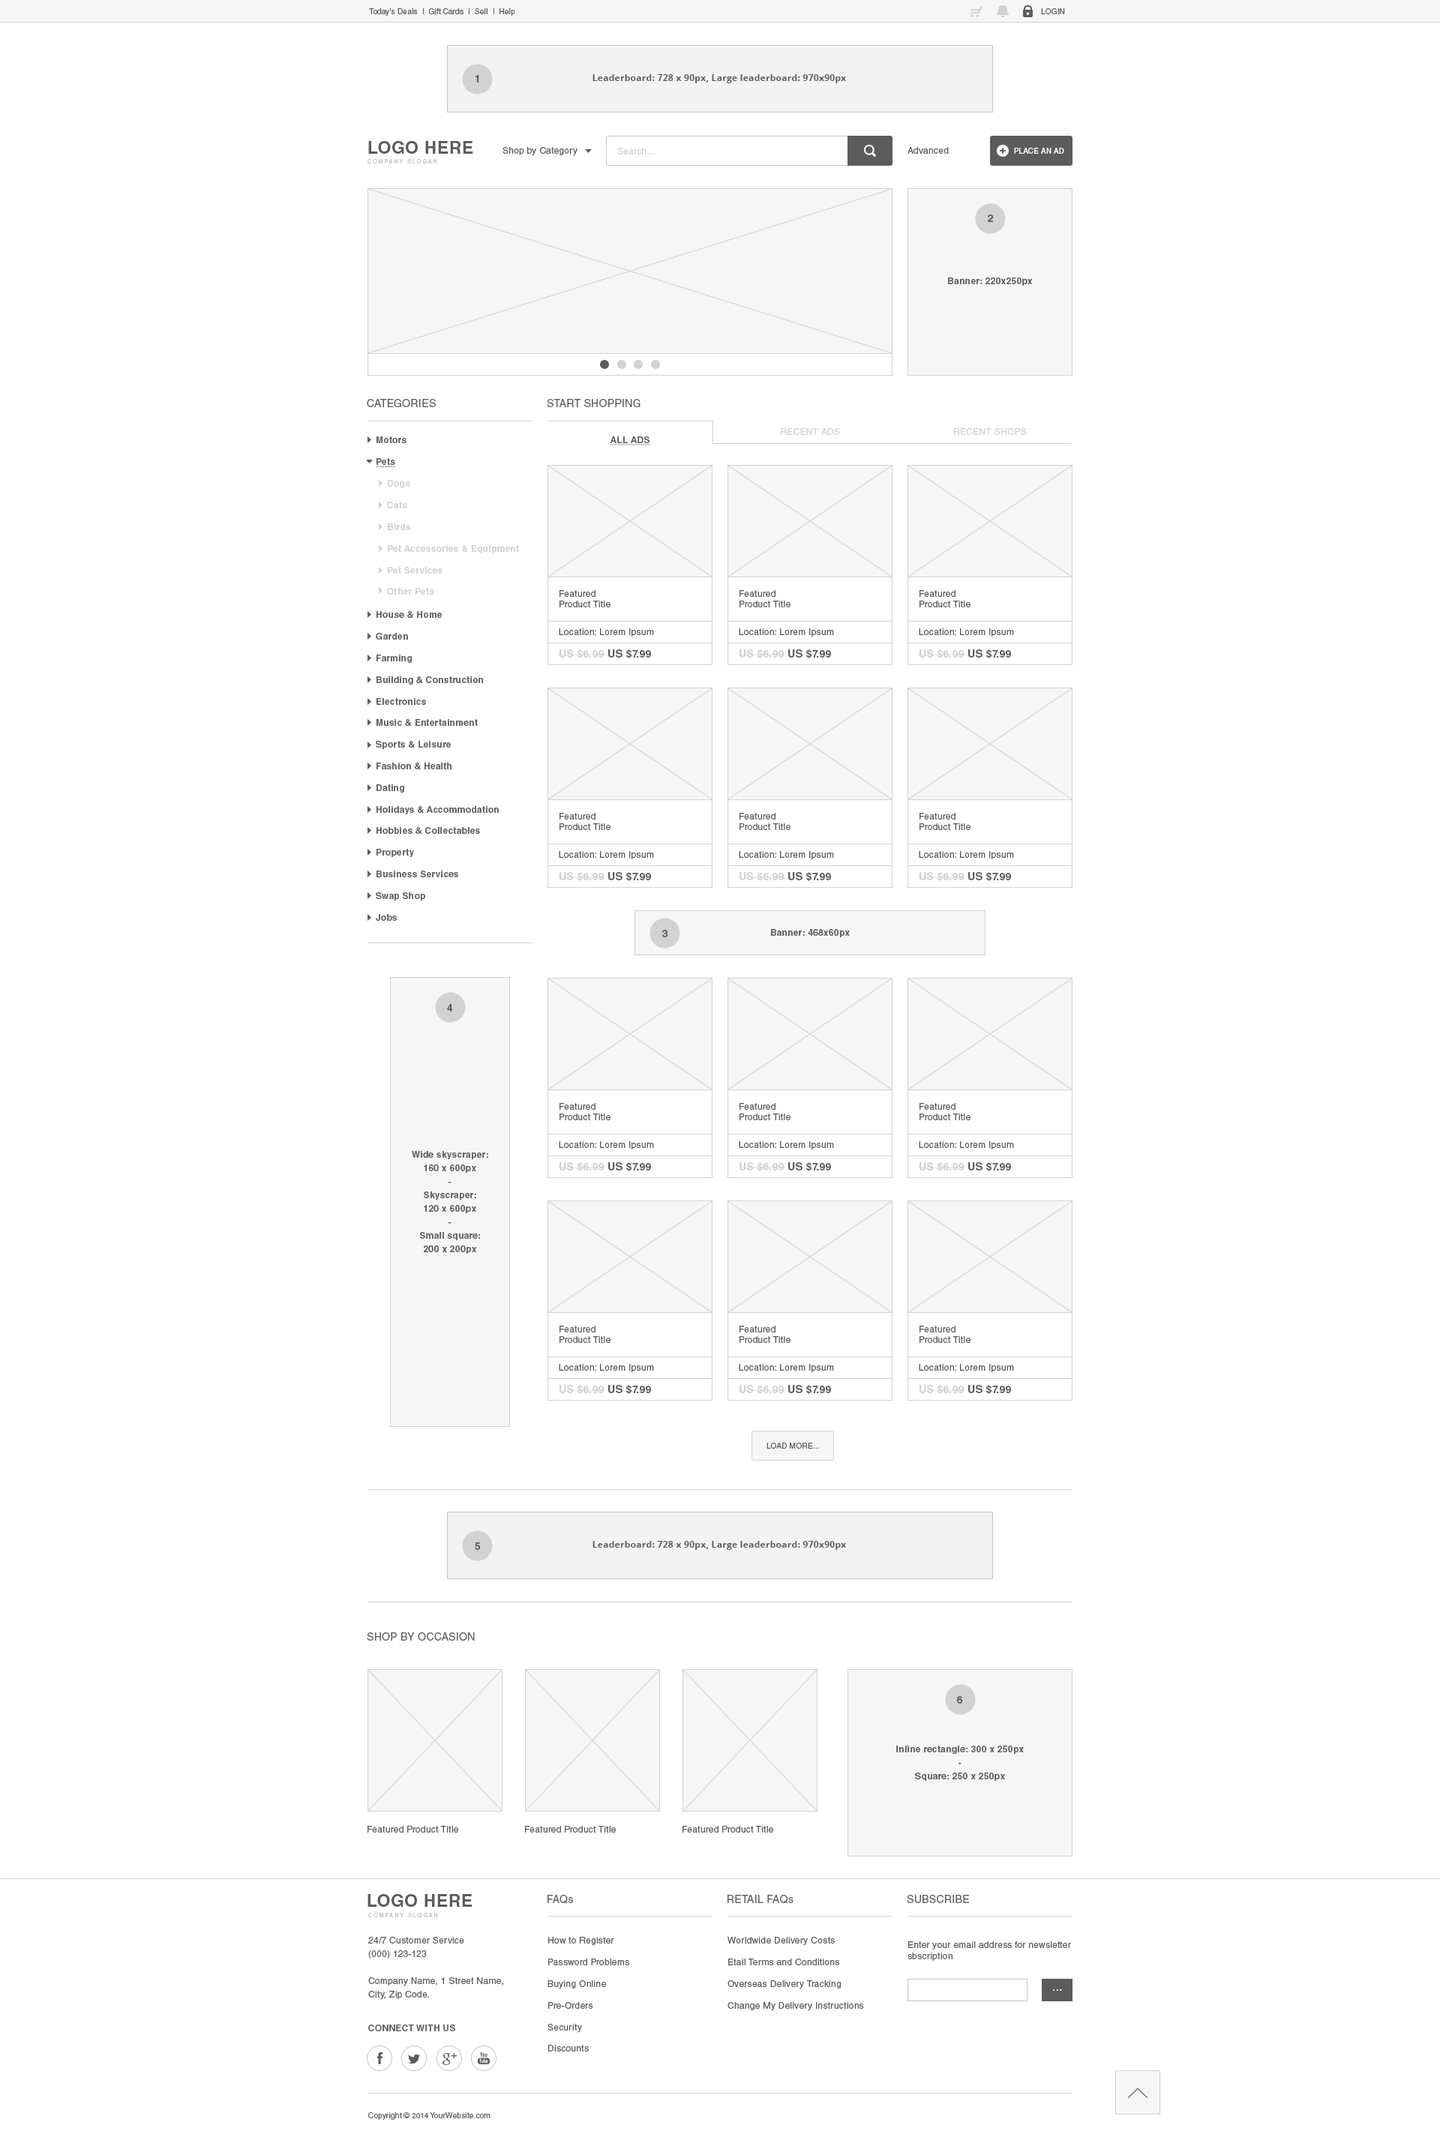
<style>
.page{position:relative;width:1440px;height:2140px;background:#ffffff}
.page>*{position:absolute;margin:0}
.t1{font:7.5px "HelveticaLTStd-Roman";letter-spacing:0.024em;color:#5c5c5c}
.t2{font:7.5px "HelveticaLTStd-Roman";letter-spacing:0.024em;color:#5c5c5c;text-transform:uppercase}
.t3{font:10.5px "HelveticaLTStd-Bold";letter-spacing:0.024em;color:#5c5c5c}
.t4{font:9px "OpenSans-Bold";letter-spacing:0.024em;color:#5c5c5c}
.t5{font:17.2px "HelveticaLTStd-Bold";letter-spacing:0.024em;color:#5c5c5c;text-transform:uppercase}
.t6{font:9px "HelveticaLTStd-Roman";letter-spacing:0.024em;color:#5c5c5c}
.t7{font:9px "HelveticaLTStd-Roman";letter-spacing:0.024em;color:#d2d2d2}
.t8{font:7.5px "HelveticaLTStd-Roman";letter-spacing:0.024em;color:#ffffff;text-transform:uppercase}
.t9{font:5.2px "HelveticaLTStd-Roman";letter-spacing:0.3em;color:#c5c5c5;text-transform:uppercase}
.t10{font:9px "HelveticaLTStd-Bold";letter-spacing:0.024em;color:#5c5c5c}
.t11{font:10.5px "HelveticaLTStd-Roman";letter-spacing:0.024em;color:#5c5c5c;text-transform:uppercase}
.t12{font:9px "HelveticaLTStd-Bold";letter-spacing:0.024em;color:#5c5c5c;text-decoration:underline}
.t13{font:9px "HelveticaLTStd-Bold";letter-spacing:0.024em;color:#5c5c5c;text-transform:uppercase;text-decoration:underline}
.t14{font:9px "HelveticaLTStd-Roman";letter-spacing:0.024em;color:#d2d2d2;text-transform:uppercase}
.t15{font:9px "HelveticaLTStd-Bold";letter-spacing:0.024em;color:#d2d2d2}
.t16{font:10.5px "HelveticaLTStd-Bold";letter-spacing:0.024em;color:#d2d2d2}
.t17{font:9px/13.5px "HelveticaLTStd-Bold";letter-spacing:0.024em;color:#5c5c5c}
.t18{font:10.5px "HelveticaLTStd-Roman";letter-spacing:0.024em;color:#5c5c5c}
.t19{font:9px/13.5px "HelveticaLTStd-Roman";letter-spacing:0.024em;color:#5c5c5c}
.t20{font:12px "OpenSans";letter-spacing:0.024em;color:#ffffff;text-transform:uppercase}
.t21{font:9px "HelveticaLTStd-Bold";letter-spacing:0.024em;color:#5c5c5c;text-transform:uppercase}
</style>
<div class="page">
<p class="t1" style="left:369px;top:8px;width:146px;height:8px">Today's Deals  |  Gift Cards  |  Sell  |  Help</p>
<p class="t2" style="left:1041px;top:8px;width:24px;height:6px">login</p>
<p class="t3" style="left:475px;top:75px;width:4px;height:7px">1</p>
<p class="t4" style="left:592px;top:74px;width:254px;height:9px">Leaderboard: 728 x 90px, Large leaderboard: 970x90px</p>
<p class="t5" style="left:368px;top:141px;width:105px;height:13px">Logo Here</p>
<p class="t6" style="left:502px;top:147px;width:76px;height:9px">Shop by Category</p>
<p class="t7" style="left:617px;top:148px;width:37px;height:6px">Search...</p>
<p class="t6" style="left:908px;top:147px;width:41px;height:7px">Advanced</p>
<p class="t8" style="left:1014px;top:148px;width:50px;height:6px">Place an ad</p>
<p class="t9" style="left:368px;top:159px;width:69px;height:5px">Company Slogan</p>
<p class="t3" style="left:988px;top:214px;width:6px;height:8px">2</p>
<p class="t10" style="left:948px;top:278px;width:85px;height:8px">Banner: 220x250px</p>
<p class="t11" style="left:367px;top:399px;width:69px;height:8px">Categories</p>
<p class="t11" style="left:547px;top:399px;width:93px;height:8px">Start shopping</p>
<p class="t10" style="left:376px;top:436px;width:30px;height:31px">Motors<br><br><span class="t12">Pets</span></p>
<p class="t13" style="left:610px;top:436px;width:40px;height:10px">All Ads</p>
<p class="t14" style="left:781px;top:428px;width:59px;height:7px">Recent Ads</p>
<p class="t14" style="left:954px;top:428px;width:73px;height:7px">Recent Shops</p>
<p class="t15" style="left:387px;top:480px;width:132px;height:115px">Dogs<br><br>Cats<br><br>Birds<br><br>Pet Accessories &amp; Equipment<br><br>Pet Services <br><br>Other Pets</p>
<p class="t6" style="left:560px;top:590px;width:50px;height:18px">Featured<br>Product Title</p>
<p class="t6" style="left:740px;top:590px;width:50px;height:18px">Featured<br>Product Title</p>
<p class="t6" style="left:920px;top:590px;width:50px;height:18px">Featured<br>Product Title</p>
<p class="t10" style="left:376px;top:611px;width:123px;height:310px">House &amp; Home<br><br>Garden<br><br>Farming<br><br>Building &amp; Construction<br><br>Electronics<br><br>Music &amp; Entertainment<br><br>Sports &amp; Leisure<br><br>Fashion &amp; Health<br><br>Dating<br><br>Holidays &amp; Accommodation<br><br>Hobbies &amp; Collectables<br><br>Property<br><br>Business Services<br><br>Swap Shop<br><br>Jobs</p>
<p class="t6" style="left:559px;top:628px;width:95px;height:9px">Location: Lorem Ipsum</p>
<p class="t6" style="left:739px;top:628px;width:95px;height:9px">Location: Lorem Ipsum</p>
<p class="t6" style="left:919px;top:628px;width:95px;height:9px">Location: Lorem Ipsum</p>
<p class="t16" style="left:559px;top:650px;width:92px;height:9px">US $6.99 <span class="t3">US $7.99</span></p>
<p class="t16" style="left:739px;top:650px;width:92px;height:9px">US $6.99 <span class="t3">US $7.99</span></p>
<p class="t16" style="left:919px;top:650px;width:92px;height:9px">US $6.99 <span class="t3">US $7.99</span></p>
<p class="t6" style="left:560px;top:813px;width:50px;height:17px">Featured<br>Product Title</p>
<p class="t6" style="left:740px;top:813px;width:50px;height:17px">Featured<br>Product Title</p>
<p class="t6" style="left:920px;top:813px;width:50px;height:17px">Featured<br>Product Title</p>
<p class="t6" style="left:559px;top:851px;width:95px;height:9px">Location: Lorem Ipsum</p>
<p class="t6" style="left:739px;top:851px;width:95px;height:9px">Location: Lorem Ipsum</p>
<p class="t6" style="left:919px;top:851px;width:95px;height:9px">Location: Lorem Ipsum</p>
<p class="t16" style="left:559px;top:872px;width:92px;height:10px">US $6.99 <span class="t3">US $7.99</span></p>
<p class="t16" style="left:739px;top:872px;width:92px;height:10px">US $6.99 <span class="t3">US $7.99</span></p>
<p class="t16" style="left:919px;top:872px;width:92px;height:10px">US $6.99 <span class="t3">US $7.99</span></p>
<p class="t10" style="left:771px;top:929px;width:79px;height:9px">Banner: 468x60px</p>
<p class="t3" style="left:662px;top:930px;width:6px;height:8px">3</p>
<p class="t3" style="left:447px;top:1004px;width:6px;height:8px">4</p>
<p class="t6" style="left:560px;top:1103px;width:50px;height:17px">Featured<br>Product Title</p>
<p class="t6" style="left:740px;top:1103px;width:50px;height:17px">Featured<br>Product Title</p>
<p class="t6" style="left:920px;top:1103px;width:50px;height:17px">Featured<br>Product Title</p>
<p class="t6" style="left:559px;top:1142px;width:95px;height:8px">Location: Lorem Ipsum</p>
<p class="t6" style="left:739px;top:1142px;width:95px;height:8px">Location: Lorem Ipsum</p>
<p class="t6" style="left:919px;top:1142px;width:95px;height:8px">Location: Lorem Ipsum</p>
<p class="t17" style="left:412px;top:1151px;width:76px;height:103px;text-align:center">Wide skyscraper:<br>160 x 600px<br>-<br>Skyscraper:<br>120 x 600px<br>-<br>Small square:<br>200 x 200px</p>
<p class="t16" style="left:559px;top:1162px;width:92px;height:10px">US $6.99 <span class="t3">US $7.99</span></p>
<p class="t16" style="left:739px;top:1162px;width:92px;height:10px">US $6.99 <span class="t3">US $7.99</span></p>
<p class="t16" style="left:919px;top:1162px;width:92px;height:10px">US $6.99 <span class="t3">US $7.99</span></p>
<p class="t6" style="left:560px;top:1326px;width:50px;height:17px">Featured<br>Product Title</p>
<p class="t6" style="left:740px;top:1326px;width:50px;height:17px">Featured<br>Product Title</p>
<p class="t6" style="left:920px;top:1326px;width:50px;height:17px">Featured<br>Product Title</p>
<p class="t6" style="left:559px;top:1364px;width:95px;height:8px">Location: Lorem Ipsum</p>
<p class="t6" style="left:739px;top:1364px;width:95px;height:8px">Location: Lorem Ipsum</p>
<p class="t6" style="left:919px;top:1364px;width:95px;height:8px">Location: Lorem Ipsum</p>
<p class="t16" style="left:559px;top:1385px;width:92px;height:10px">US $6.99 <span class="t3">US $7.99</span></p>
<p class="t16" style="left:739px;top:1385px;width:92px;height:10px">US $6.99 <span class="t3">US $7.99</span></p>
<p class="t16" style="left:919px;top:1385px;width:92px;height:10px">US $6.99 <span class="t3">US $7.99</span></p>
<p class="t2" style="left:766px;top:1443px;width:53px;height:6px">lOAD MORE...</p>
<p class="t4" style="left:592px;top:1541px;width:254px;height:9px">Leaderboard: 728 x 90px, Large leaderboard: 970x90px</p>
<p class="t3" style="left:475px;top:1543px;width:6px;height:7px">5</p>
<p class="t11" style="left:367px;top:1633px;width:108px;height:8px">Shop by occasion</p>
<p class="t3" style="left:957px;top:1696px;width:6px;height:8px">6</p>
<p class="t17" style="left:896px;top:1746px;width:128px;height:35px;text-align:center">Inline rectangle: 300 x 250px<br>-<br>Square: 250 x 250px</p>
<p class="t6" style="left:368px;top:1826px;width:90px;height:7px">Featured Product Title</p>
<p class="t6" style="left:525px;top:1826px;width:91px;height:7px">Featured Product Title</p>
<p class="t6" style="left:682px;top:1826px;width:91px;height:7px">Featured Product Title</p>
<p class="t5" style="left:368px;top:1894px;width:104px;height:13px">Logo Here</p>
<p class="t11" style="left:548px;top:1895px;width:25px;height:9px">FAQ<span class="t18">s</span></p>
<p class="t11" style="left:728px;top:1895px;width:66px;height:9px">REtail FAQ<span class="t18">s</span></p>
<p class="t11" style="left:907px;top:1895px;width:62px;height:9px">Subscribe</p>
<p class="t9" style="left:368px;top:1913px;width:70px;height:5px">Company Slogan</p>
<p class="t19" style="left:368px;top:1937px;width:135px;height:63px">24/7 Customer Service<br>(000) 123-123<br><br>Company Name, 1 Street Name,<br>City, Zip Code.</p>
<p class="t6" style="left:548px;top:1937px;width:81px;height:115px">How to Register<br><br>Password Problems<br><br>Buying Online<br><br>Pre-Orders<br><br>Security<br><br>Discounts</p>
<p class="t6" style="left:728px;top:1937px;width:136px;height:75px">Worldwide Delivery Costs<br><br>Etail Terms and Conditions<br><br>Overseas Delivery Tracking<br><br>Change My Delivery Instructions</p>
<p class="t6" style="left:908px;top:1942px;width:163px;height:19px">Enter your email address for newsletter sbscription</p>
<p class="t20" style="left:1053px;top:1990px;width:9px;height:1px">...</p>
<p class="t21" style="left:368px;top:2025px;width:87px;height:7px">Connect with Us</p>
<p class="t1" style="left:368px;top:2113px;width:122px;height:7px">Copyright © 2014 YourWebsite.com</p>
</div>
